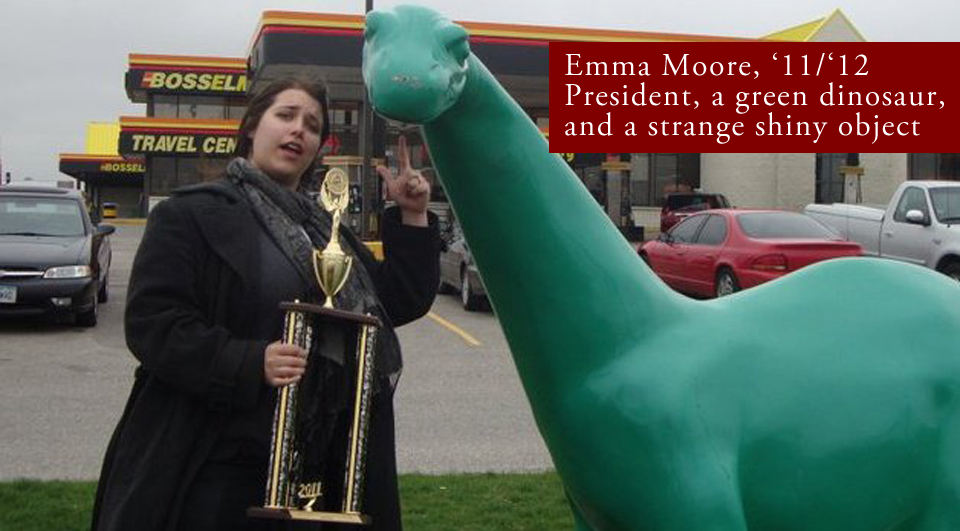
<style>
.page{position:relative;width:960px;height:531px}
.page>*{position:absolute;margin:0}
.t1{font:32px/30px "AGaramondPro-Regular";letter-spacing:0.046em;color:#ffffff}
</style>
<div class="page">
<p class="t1" style="left:565px;top:52px;width:379px;height:92px">Emma Moore, ‘11/‘12 <br>President, a green dinosaur, <br>and a strange shiny object</p>
</div>
